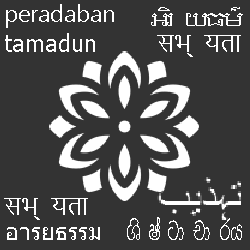
<style>
.page{position:relative;width:250px;height:250px;background:#333333}
.page>*{position:absolute;margin:0}
.t1{font:24px "LeelawadeeUI-Semilight";color:#ffffff}
.t2{font:24px "LeelawadeeUI-Semilight";letter-spacing:-0.1em;color:#ffffff}
.t3{font:24px "Tahoma";color:#ffffff}
.t4{font:24px "NirmalaText-Semilight";color:#ffffff}
.t5{font:26.2px "NirmalaText-Semilight";letter-spacing:-0.1em;color:#ffffff;scale:0.62 1}
</style>
<div class="page">
<p class="t1" style="left:6px;top:4px;width:108px;height:24px">peradaban</p>
<p class="t2" style="left:151px;top:7px;width:92px;height:19px">អរិយធម៌</p>
<p class="t3" style="left:5px;top:33px;width:90px;height:19px">tamadun</p>
<p class="t4" style="left:157px;top:35px;width:84px;height:22px">सभ्यता</p>
<p class="t4" style="left:4px;top:198px;width:84px;height:22px">सभ्यता</p>
<p class="t5" style="left:127px;top:217px;width:115px;height:23px">ශිෂ්ටාචාරය</p>
<p class="t3" style="left:7px;top:227px;width:93px;height:13px"><span class="t4"><br></span>อารยธรรม</p>
</div>
